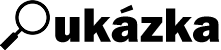
<style>
.page{position:relative;width:221px;height:50px;background:#ffffff}
.page>*{position:absolute;margin:0}
.t1{font:50px "FranklinGothic-Heavy";color:#000000}
</style>
<div class="page">
<p class="t1" style="left:55px;top:4px;width:165px;height:39px">ukázka</p>
</div>
